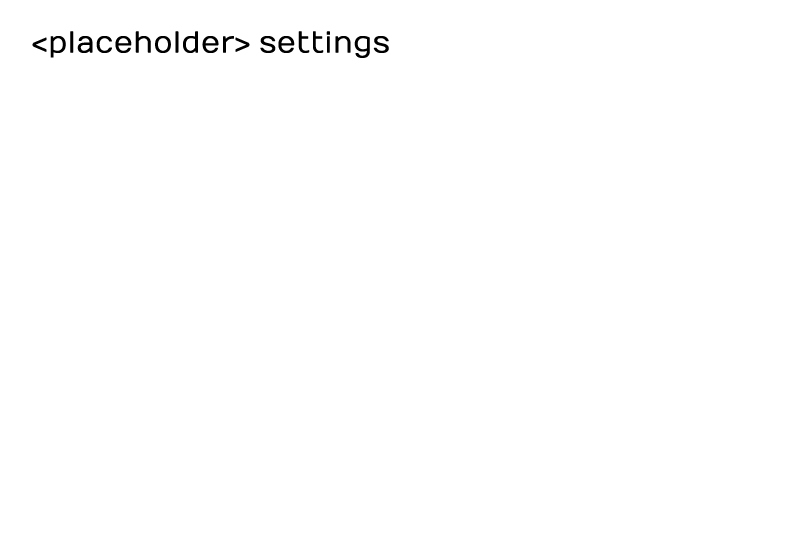
<style>
.page{position:relative;width:800px;height:540px;background:#ffffff}
.page>*{position:absolute;margin:0}
.t1{font:30px "Numans-Regular";color:#000000}
</style>
<div class="page">
<p class="t1" style="left:32px;top:31px;width:357px;height:27px">&lt;placeholder&gt; settings</p>
</div>
